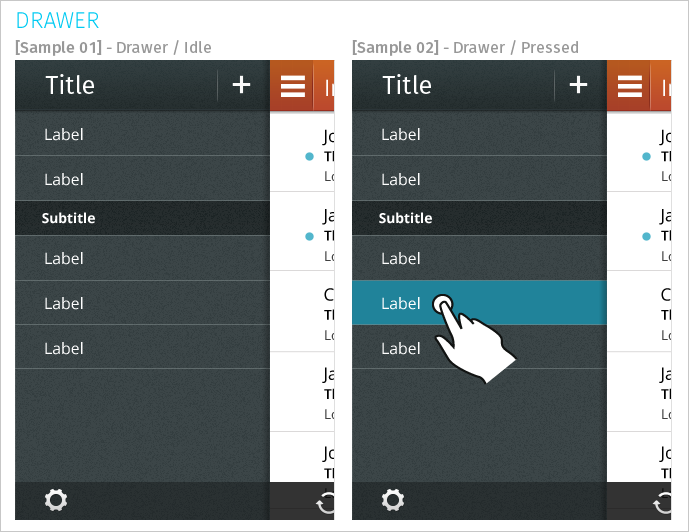
<style>
.page{position:relative;width:689px;height:532px;background:#ffffff}
.page>*{position:absolute;margin:0}
.t1{font:22.9px "MozLight";color:#00caf2;text-transform:uppercase}
.t2{font:15.8px "Moz";color:#989898}
.t3{font:15.8px "MozMedium";color:#989898}
.t4{font:25.2px "Moz";color:#ffffff}
.t5{font:15.8px/45.3px "OpenSans";color:#ffffff}
.t6{font:13.8px "OpenSans-Bold";color:#ffffff}
</style>
<div class="page">
<p class="t1" style="left:17px;top:12px;width:82px;height:16px">DRAWER</p>
<p class="t2" style="left:15px;top:40px;width:196px;height:16px"><span class="t3">[Sample 01]</span> - Drawer / Idle</p>
<p class="t2" style="left:352px;top:40px;width:226px;height:16px"><span class="t3">[Sample 02]</span> - Drawer / Pressed</p>
<p class="t4" style="left:45px;top:74px;width:49px;height:20px">Title</p>
<p class="t4" style="left:382px;top:74px;width:49px;height:20px">Title</p>
<p class="t5" style="left:45px;top:128px;width:38px;height:58px">Label<br>Label</p>
<p class="t5" style="left:382px;top:128px;width:38px;height:58px">Label<br>Label</p>
<p class="t6" style="left:42px;top:212px;width:53px;height:12px">Subtitle</p>
<p class="t6" style="left:379px;top:212px;width:53px;height:12px">Subtitle</p>
<p class="t5" style="left:45px;top:252px;width:38px;height:103px">Label<br>Label<br>Label</p>
<p class="t5" style="left:382px;top:252px;width:38px;height:103px">Label<br>Label<br>Label</p>
</div>
